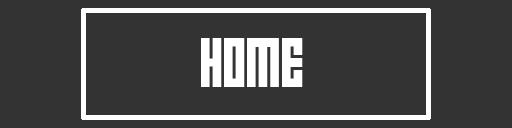
<style>
.page{position:relative;width:512px;height:128px;background:#333333}
.page>*{position:absolute;margin:0}
.t1{font:57.8px "AngiesNewHouse";color:#ffffff}
</style>
<div class="page">
<p class="t1" style="left:201px;top:38px;width:102px;height:49px">HOME</p>
</div>
